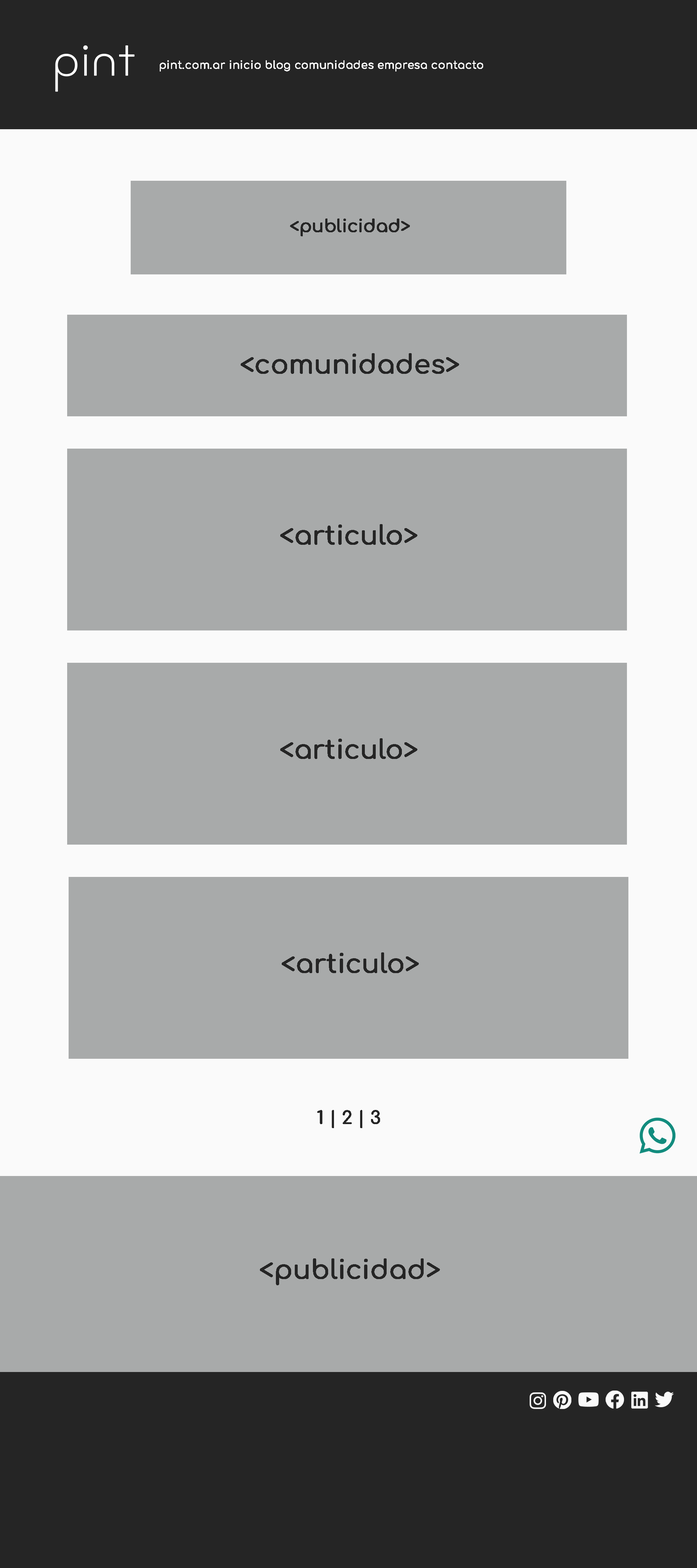
<style>
.page{position:relative;width:697px;height:1568px;background:#a8aaaa}
.page>*{position:absolute;margin:0}
.t1{font:10.9px "Comfortaa-Medium";letter-spacing:-0.01em;color:#fafafa;font-weight:bold}
.t2{font:17.4px "Comfortaa-Medium";letter-spacing:-0.01em;color:#252525;font-weight:bold}
.t3{font:26.1px "Comfortaa-Medium";letter-spacing:-0.01em;color:#252525;font-weight:bold}
</style>
<div class="page">
<p class="t1" style="left:160px;top:60px;width:323px;height:12px">pint.com.ar inicio blog comunidades empresa contacto</p>
<p class="t2" style="left:290px;top:219px;width:120px;height:17px">&lt;publicidad&gt;</p>
<p class="t3" style="left:241px;top:353px;width:218px;height:21px">&lt;comunidades&gt;</p>
<p class="t3" style="left:280px;top:524px;width:137px;height:21px">&lt;articulo&gt;</p>
<p class="t3" style="left:280px;top:738px;width:137px;height:21px">&lt;articulo&gt;</p>
<p class="t3" style="left:282px;top:952px;width:137px;height:21px">&lt;articulo&gt;</p>
<p class="t2" style="left:317px;top:1110px;width:63px;height:18px">1 | 2 | 3</p>
<p class="t3" style="left:260px;top:1258px;width:180px;height:27px">&lt;publicidad&gt;</p>
</div>
